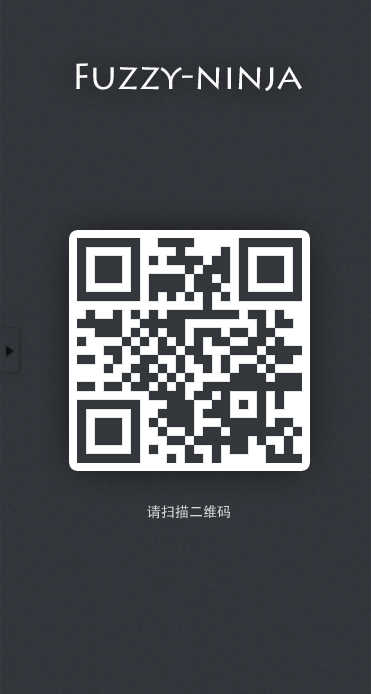
<style>
.page{position:relative;width:371px;height:694px}
.page>*{position:absolute;margin:0}
.t1{font:36px "LithosPro-Regular";color:#fafafa}
.t2{font:14px "AdobeHeitiStd-Regular";color:#d7d7d7}
</style>
<div class="page">
<p class="t1" style="left:76px;top:63px;width:226px;height:28px">Fuzzy-ninja</p>
<p class="t2" style="left:147px;top:505px;width:83px;height:14px">请扫描二维码</p>
</div>
